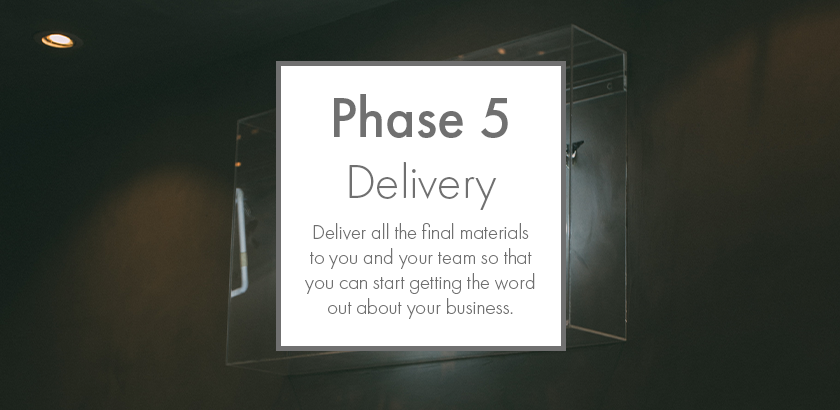
<style>
.page{position:relative;width:840px;height:410px;background:#ffffff}
.page>*{position:absolute;margin:0}
.t1{font:58.3px "FuturaPT-Medium";color:#707070}
.t2{font:50px "FuturaPT-Light";color:#707070}
.t3{font:20.8px "FuturaPT-Light";color:#707070}
</style>
<div class="page">
<p class="t1" style="left:334px;top:94px;width:174px;height:44px">Phase 5</p>
<p class="t2" style="left:349px;top:162px;width:148px;height:48px">Delivery</p>
<p class="t3" style="left:305px;top:223px;width:230px;height:96px;text-align:center">Deliver all the final materials to you and your team so that you can start getting the word out about your business.</p>
</div>
